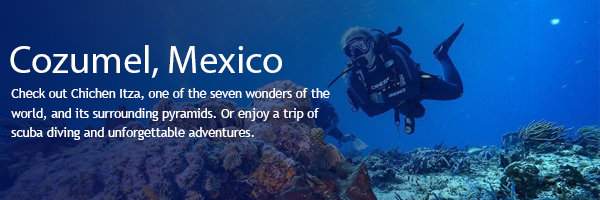
<style>
.page{position:relative;width:600px;height:200px}
.page>*{position:absolute;margin:0}
.t1{font:38.9px "MyriadPro-Regular";color:#ffffff}
.t2{font:12.5px/19.4px "TrebuchetMS";color:#ffffff}
</style>
<div class="page">
<p class="t1" style="left:10px;top:45px;width:272px;height:33px">Cozumel, Mexico</p>
<p class="t2" style="left:11px;top:88px;width:319px;height:52px">Check out Chichen Itza, one of the seven wonders of the world, and its surrounding pyramids. Or enjoy a trip of scuba diving and unforgettable adventures.</p>
</div>
